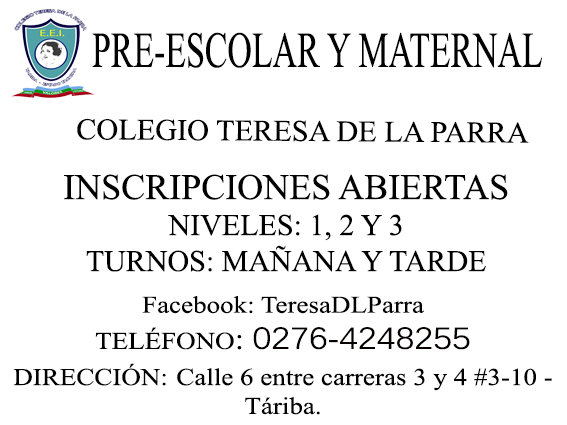
<style>
.page{position:relative;width:567px;height:425px;background:#ffffff}
.page>*{position:absolute;margin:0}
.t1{font:50.5px "TimesNewRomanPSMT";color:#010000;scale:0.67 1}
.t2{font:29.9px "TimesNewRomanPSMT";color:#010000}
.t3{font:30px "TimesNewRomanPSMT";color:#000000}
.t4{font:36px "TimesNewRomanPSMT";color:#000000}
.t5{font:24.1px "TimesNewRomanPSMT";color:#000000;scale:1.12 1}
.t6{font:30.1px "TimesNewRomanPSMT";color:#000000;scale:1.12 1}
.t7{font:30.1px "Kalinga";color:#050000;scale:1.12 1}
</style>
<div class="page">
<p class="t1" style="left:92px;top:32px;width:450px;height:36px">PRE-ESCOLAR Y MATERNAL</p>
<p class="t2" style="left:77px;top:118px;width:452px;height:25px">COLEGIO TERESA DE LA PARRA</p>
<p class="t3" style="left:64px;top:174px;width:444px;height:98px;text-align:center"><span class="t4">INSCRIPCIONES ABIERTAS<br></span>NIVELES: 1, 2 Y 3<br>TURNOS: MAÑANA Y TARDE</p>
<p class="t5" style="left:13px;top:296px;width:539px;height:119px;text-align:center">Facebook: TeresaDLParra<br>TELÉFONO<span class="t6">: </span><span class="t7">0276-4248255<br></span>DIRECCIÓN: Calle 6 entre carreras 3 y 4 #3-10 - Táriba.</p>
</div>
